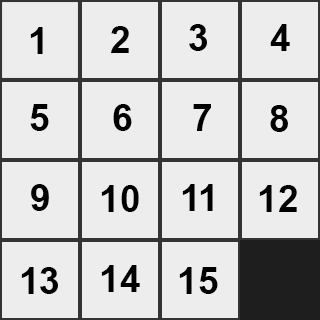
<style>
.page{position:relative;width:320px;height:320px;background:#ededed}
.page>*{position:absolute;margin:0}
.t1{font:36.9px "Arial-BoldMT";color:#000000}
.t2{font:36.8px "Arial-BoldMT";color:#000000}
</style>
<div class="page">
<p class="t1" style="left:30px;top:27px;width:13px;height:27px">1</p>
<p class="t1" style="left:111px;top:26px;width:18px;height:27px">2</p>
<p class="t1" style="left:189px;top:24px;width:18px;height:27px">3</p>
<p class="t2" style="left:270px;top:24px;width:20px;height:27px">4</p>
<p class="t2" style="left:30px;top:104px;width:19px;height:27px">5</p>
<p class="t1" style="left:113px;top:104px;width:19px;height:27px">6</p>
<p class="t2" style="left:193px;top:104px;width:18px;height:27px">7</p>
<p class="t2" style="left:270px;top:105px;width:18px;height:27px">8</p>
<p class="t1" style="left:31px;top:184px;width:18px;height:27px">9</p>
<p class="t1" style="left:101px;top:185px;width:38px;height:27px">10</p>
<p class="t1" style="left:182px;top:184px;width:31px;height:27px">11</p>
<p class="t1" style="left:259px;top:185px;width:38px;height:27px">12</p>
<p class="t1" style="left:21px;top:267px;width:37px;height:27px">13</p>
<p class="t1" style="left:101px;top:265px;width:39px;height:27px">14</p>
<p class="t1" style="left:179px;top:267px;width:39px;height:27px">15</p>
</div>
